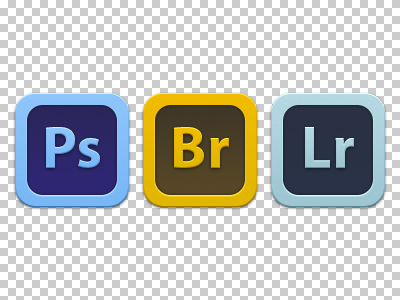
<style>
.page{position:relative;width:400px;height:300px;background:#cccccc}
.page>*{position:absolute;margin:0}
.t1{font:60px "MyriadPro-Bold";color:#82bdf8}
.t2{font:60px "MyriadPro-Bold";color:#e7b901}
.t3{font:60.2px "MyriadPro-Bold";color:#a5ccd8}
</style>
<div class="page">
<p class="t1" style="left:46px;top:127px;width:54px;height:41px">Ps</p>
<p class="t2" style="left:174px;top:127px;width:55px;height:41px">Br</p>
<p class="t3" style="left:305px;top:127px;width:49px;height:41px">Lr</p>
</div>
